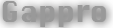
<style>
.page{position:relative;width:113px;height:28px;background:#999999}
.page>*{position:absolute;margin:0}
.t1{font:28px "Silom";color:#999999}
</style>
<div class="page">
<p class="t1" style="left:2px;top:1px;width:104px;height:26px">Gappro</p>
</div>
